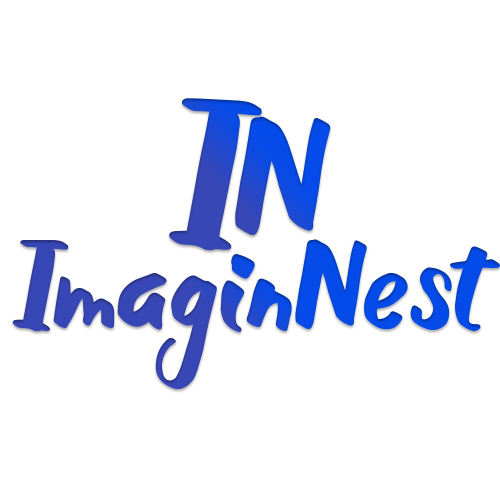
<style>
.page{position:relative;width:500px;height:500px;background:#ffffff}
.page>*{position:absolute;margin:0}
.t1{font:150px "Garotte"}
</style>
<div class="page">
<p class="t1" style="left:12px;top:239px;width:488px;height:150px">ImaginNest</p>
</div>
